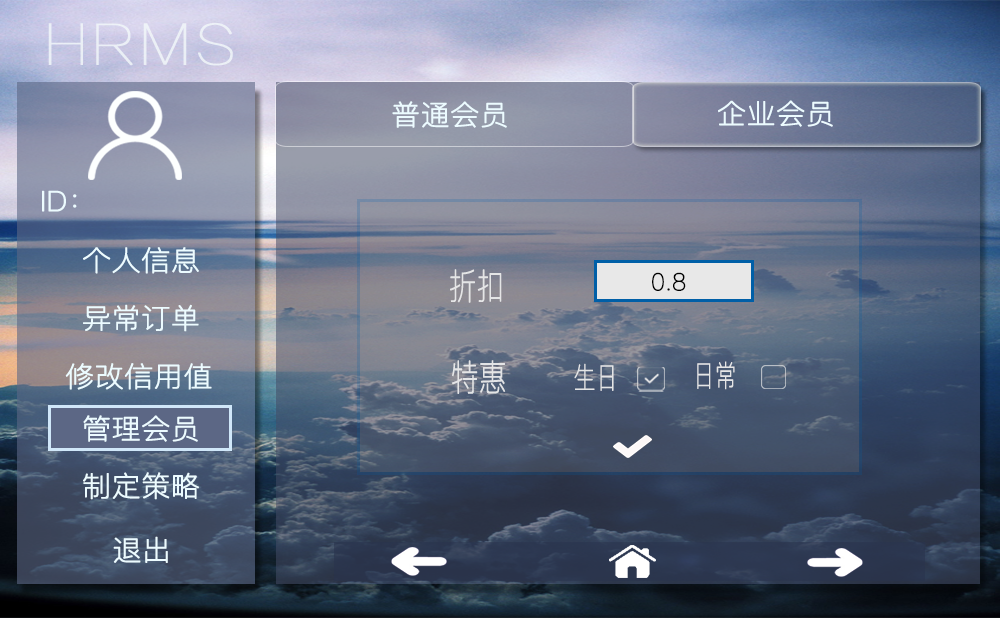
<style>
.page{position:relative;width:1000px;height:618px}
.page>*{position:absolute;margin:0}
.t1{font:27.8px "PingFangSC-Thin";color:#ecfbff;font-weight:bold;scale:1.04 1}
.t2{font:35.6px "PingFangSC-Ultralight";color:#fafbfd;font-weight:bold;scale:0.77 1}
.t3{font:23.5px "PingFangSC-Ultralight";color:#000000;font-weight:bold}
.t4{font:36px "PingFangSC-Ultralight";color:#fafbfd;font-weight:bold;scale:0.76 1}
.t5{font:29.2px "PingFangSC-Ultralight";color:#fafbfd;font-weight:bold;scale:0.74 1}
</style>
<div class="page">
<p class="t1" style="left:392px;top:101px;width:115px;height:27px">普通会员</p>
<p class="t1" style="left:718px;top:100px;width:115px;height:27px">企业会员</p>
<p class="t1" style="left:42px;top:190px;width:35px;height:22px">ID：</p>
<p class="t1" style="left:83px;top:247px;width:116px;height:27px">个人信息</p>
<p class="t2" style="left:450px;top:269px;width:52px;height:34px">折扣</p>
<p class="t3" style="left:652px;top:272px;width:34px;height:19px">0.8</p>
<p class="t1" style="left:83px;top:304px;width:116px;height:28px">异常订单</p>
<p class="t1" style="left:65px;top:363px;width:147px;height:27px">修改信用值</p>
<p class="t4" style="left:452px;top:360px;width:54px;height:34px">特惠</p>
<p class="t5" style="left:574px;top:363px;width:40px;height:28px">生日</p>
<p class="t5" style="left:697px;top:361px;width:38px;height:29px">日常</p>
<p class="t1" style="left:83px;top:415px;width:115px;height:27px">管理会员</p>
<p class="t1" style="left:83px;top:472px;width:116px;height:28px">制定策略</p>
<p class="t1" style="left:113px;top:536px;width:55px;height:27px">退出</p>
</div>
